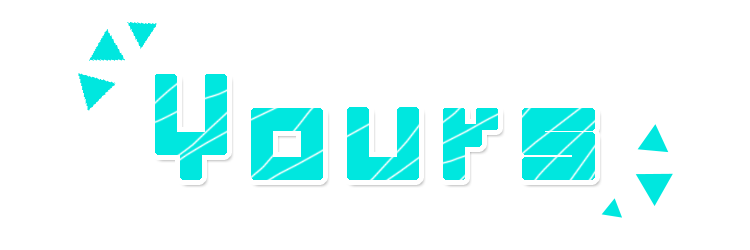
<style>
.page{position:relative;width:750px;height:250px;background:#ffffff}
.page>*{position:absolute;margin:0}
.t1{font:170px "tama-mini02";letter-spacing:0.05em;color:#00e7df;font-weight:bold}
</style>
<div class="page">
<p class="t1" style="left:155px;top:74px;width:440px;height:106px">Yours</p>
</div>
